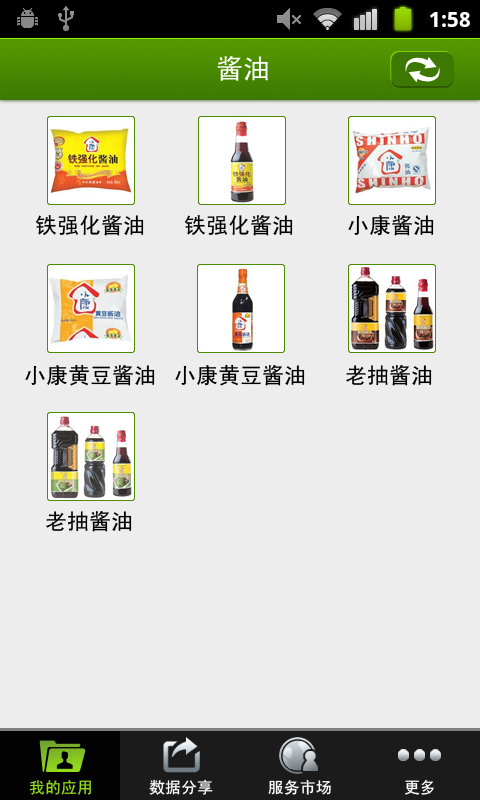
<style>
.page{position:relative;width:480px;height:800px;background:#eeeded}
.page>*{position:absolute;margin:0}
.t1{font:27px "SimHei";color:#ffffff}
.t2{font:22px "SimHei";color:#000000}
.t3{font:16px "SimHei";color:#94db1c}
.t4{font:16px "SimHei";color:#ffffff}
</style>
<div class="page">
<p class="t1" style="left:217px;top:56px;width:51px;height:25px">酱油</p>
<p class="t2" style="left:35px;top:215px;width:109px;height:21px">铁强化酱油</p>
<p class="t2" style="left:184px;top:215px;width:109px;height:21px">铁强化酱油</p>
<p class="t2" style="left:348px;top:215px;width:86px;height:21px">小康酱油</p>
<p class="t2" style="left:25px;top:364px;width:130px;height:22px">小康黄豆酱油</p>
<p class="t2" style="left:175px;top:364px;width:130px;height:22px">小康黄豆酱油</p>
<p class="t2" style="left:346px;top:365px;width:86px;height:21px">老抽酱油</p>
<p class="t2" style="left:46px;top:511px;width:86px;height:21px">老抽酱油</p>
<p class="t3" style="left:29px;top:780px;width:62px;height:15px">我的应用</p>
<p class="t4" style="left:149px;top:779px;width:64px;height:16px">数据分享</p>
<p class="t4" style="left:268px;top:779px;width:63px;height:16px">服务市场</p>
<p class="t4" style="left:405px;top:779px;width:29px;height:16px">更多</p>
</div>
